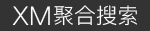
<style>
.page{position:relative;width:150px;height:31px;background:#333333}
.page>*{position:absolute;margin:0}
.t1{font:26px "PingFang-SC-Regular";color:#ffffff}
.t2{font:21.6px "PingFang-SC-Regular";color:#ffffff}
</style>
<div class="page">
<p class="t1" style="left:12px;top:6px;width:38px;height:20px">XM</p>
<p class="t2" style="left:53px;top:5px;width:84px;height:21px">聚合搜索</p>
</div>
